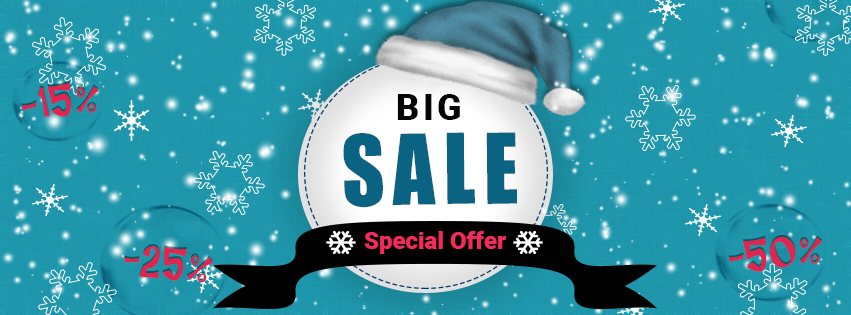
<style>
.page{position:relative;width:851px;height:315px}
.page>*{position:absolute;margin:0}
.t1{font:40px "ARCHRISTY";color:#e02551}
.t2{font:36px "Roboto-Black";letter-spacing:0.1em;color:#040404}
.t3{font:90px "Impact";letter-spacing:0.1em;color:#0b6383;scale:0.93 1}
.t4{font:24px "Roboto-Black";color:#f22b5a}
</style>
<div class="page">
<p class="t1" style="left:21px;top:82px;width:78px;height:35px;rotate:-8deg">-15%</p>
<p class="t2" style="left:397px;top:94px;width:63px;height:26px">BIG</p>
<p class="t3" style="left:343px;top:132px;width:174px;height:76px;rotate:-1deg">SALE</p>
<p class="t4" style="left:364px;top:231px;width:142px;height:23px">Special Offer</p>
<p class="t1" style="left:124px;top:246px;width:89px;height:37px;rotate:6deg">-25%</p>
<p class="t1" style="left:728px;top:237px;width:95px;height:35px;rotate:-8deg">-50%</p>
</div>
